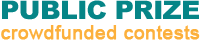
<style>
.page{position:relative;width:200px;height:40px;background:#ffffff}
.page>*{position:absolute;margin:0}
.t1{font:25.6px "Arial-Black";letter-spacing:-0.025em;color:#068587;scale:1.03 1}
.t2{font:18.8px "ArialMT";color:#fcb03c;font-weight:bold;scale:1.03 1}
</style>
<div class="page">
<p class="t1" style="left:2px;top:0px;width:197px;height:20px">PUBLIC PRIZE</p>
<p class="t2" style="left:1px;top:25px;width:199px;height:15px">crowdfunded contests</p>
</div>
